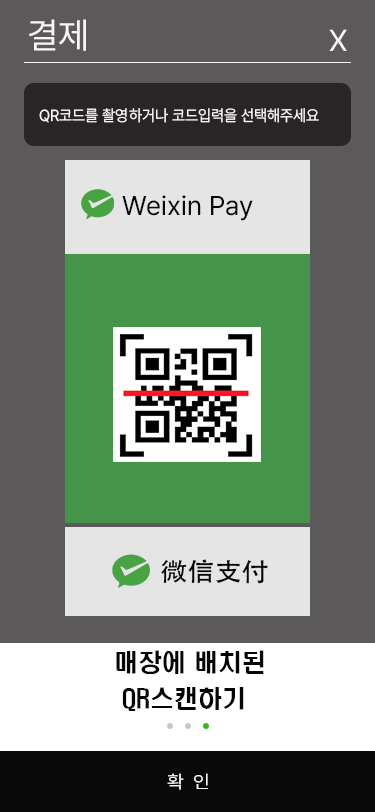
<style>
.page{position:relative;width:375px;height:812px;background:#5b5959}
.page>*{position:absolute;margin:0}
.t1{font:36px "Pretendard-Regular";color:#fbf6f6}
.t2{font:30px "Pretendard-Regular";color:#fbf6f6}
.t3{font:16px "Pretendard-Regular";color:#fbf6f6;scale:0.95 1}
.t4{font:27px "Pretendard-Regular";color:#0b0a0a}
.t5{font:25.5px "AdobeHeitiStd-Regular";color:#060606;scale:1.06 1}
.t6{font:24px/36px "H2hdrM";color:#060606}
.t7{font:18px "Pretendard-Regular";color:#f2f6f2;scale:1.07 1}
</style>
<div class="page">
<p class="t1" style="left:28px;top:19px;width:58px;height:32px">결제</p>
<p class="t2" style="left:329px;top:29px;width:18px;height:22px">X</p>
<p class="t3" style="left:39px;top:108px;width:280px;height:15px">QR코드를 촬영하거나 코드입력을 선택해주세요</p>
<p class="t4" style="left:122px;top:195px;width:131px;height:26px">Weixin Pay</p>
<p class="t5" style="left:161px;top:559px;width:107px;height:25px">微信支付</p>
<p class="t6" style="left:116px;top:650px;width:148px;height:61px">매장에 배치된<br> QR스캔하기</p>
<p class="t7" style="left:167px;top:773px;width:41px;height:17px">확  인</p>
</div>
